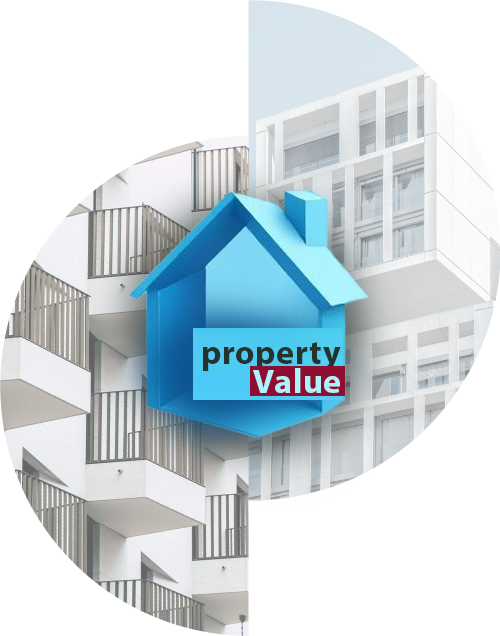
<style>
.page{position:relative;width:500px;height:636px;background:#ffffff}
.page>*{position:absolute;margin:0}
.t1{font:34px "MyriadPro-Bold";letter-spacing:0.02em;color:#25322e}
.t2{font:34px "MyriadPro-Bold";letter-spacing:0.02em;color:#adf3fa}
</style>
<div class="page">
<p class="t1" style="left:203px;top:342px;width:138px;height:30px">property</p>
<p class="t2" style="left:253px;top:368px;width:87px;height:25px">Value</p>
</div>
